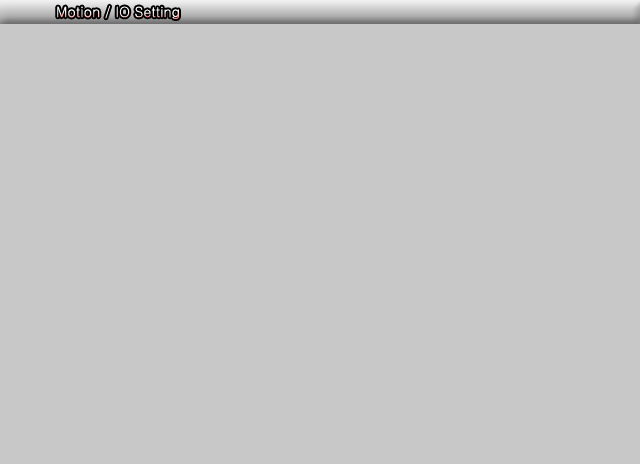
<style>
.page{position:relative;width:640px;height:464px;background:#c8c8c8}
.page>*{position:absolute;margin:0}
.t1{font:14px "Gulim"}
</style>
<div class="page">
<p class="t1" style="left:57px;top:5px;width:122px;height:14px">Motion / IO Setting</p>
</div>
